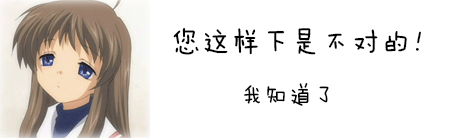
<style>
.page{position:relative;width:450px;height:138px;background:#ffffff}
.page>*{position:absolute;margin:0}
.t1{font:30px "FZMWJW--GB1-0";color:#000000}
.t2{font:24px "FZMWJW--GB1-0";color:#000000}
</style>
<div class="page">
<p class="t1" style="left:173px;top:28px;width:248px;height:27px">您这样下是不对的！</p>
<p class="t2" style="left:244px;top:83px;width:85px;height:23px">我知道了</p>
</div>
